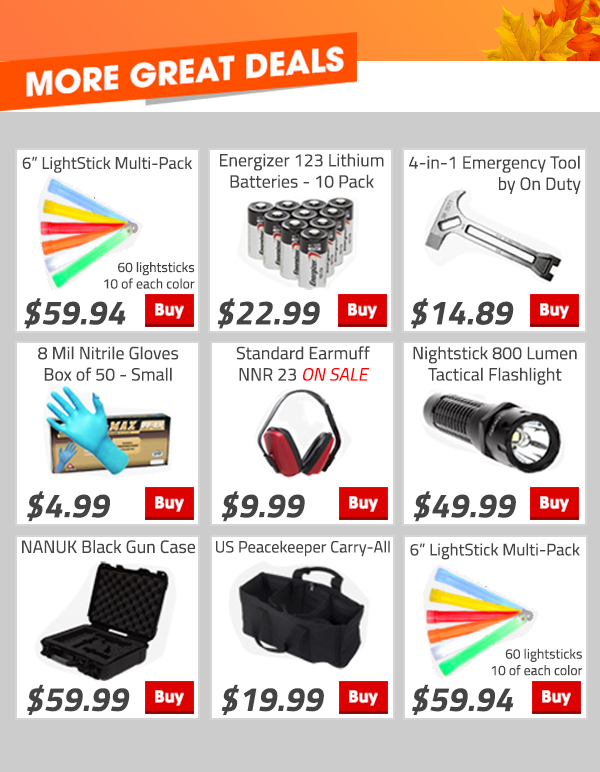
<style>
.page{position:relative;width:600px;height:772px;background:#ffffff}
.page>*{position:absolute;margin:0}
.t1{font:16.7px "Titillium-Regular";letter-spacing:0.005em;color:#444444}
.t2{font:17.7px "Titillium-Regular";letter-spacing:0.005em;color:#444444}
.t3{font:13.7px "Titillium-Regular";letter-spacing:0.005em;color:#444444}
.t4{font:33.7px "Titillium-BoldUpright";letter-spacing:0.005em;color:#444444;font-style:italic}
.t5{font:17.7px "Titillium-Regular";letter-spacing:0.005em;color:#ff0000;font-style:italic}
.t6{font:16.3px "Titillium-Regular";letter-spacing:0.005em;color:#444444}
</style>
<div class="page">
<p class="t1" style="left:22px;top:156px;width:170px;height:17px">6” LightStick Multi-Pack</p>
<p class="t2" style="left:220px;top:153px;width:164px;height:35px;text-align:center">Energizer 123 Lithium<br>Batteries - 10 Pack</p>
<p class="t2" style="left:409px;top:155px;width:172px;height:39px;text-align:right">4-in-1 Emergency Tool<br>by On Duty</p>
<p class="t3" style="left:104px;top:262px;width:91px;height:27px;text-align:right">60 lightsticks<br>10 of each color</p>
<p class="t4" style="left:24px;top:298px;width:102px;height:31px">$59.94</p>
<p class="t4" style="left:217px;top:298px;width:103px;height:31px">$22.99</p>
<p class="t4" style="left:411px;top:298px;width:103px;height:31px">$14.89</p>
<p class="t2" style="left:38px;top:346px;width:141px;height:35px;text-align:center">8 Mil Nitrile Gloves<br>Box of 50 - Small</p>
<p class="t2" style="left:236px;top:346px;width:134px;height:35px;text-align:center">Standard Earmuff<br>NNR 23 <span class="t5">ON SALE</span></p>
<p class="t2" style="left:413px;top:346px;width:164px;height:39px;text-align:center">Nightstick 800 Lumen<br>Tactical Flashlight</p>
<p class="t4" style="left:27px;top:491px;width:83px;height:31px">$4.99</p>
<p class="t4" style="left:221px;top:491px;width:84px;height:31px">$9.99</p>
<p class="t4" style="left:413px;top:491px;width:103px;height:31px">$49.99</p>
<p class="t2" style="left:22px;top:540px;width:173px;height:14px">NANUK Black Gun Case</p>
<p class="t6" style="left:216px;top:540px;width:174px;height:17px">US Peacekeeper Carry-All</p>
<p class="t1" style="left:410px;top:543px;width:170px;height:17px">6” LightStick Multi-Pack</p>
<p class="t3" style="left:491px;top:648px;width:92px;height:28px;text-align:right">60 lightsticks<br>10 of each color</p>
<p class="t4" style="left:27px;top:684px;width:103px;height:31px">$59.99</p>
<p class="t4" style="left:221px;top:684px;width:103px;height:31px">$19.99</p>
<p class="t4" style="left:412px;top:684px;width:102px;height:31px">$59.94</p>
</div>
